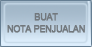
<style>
.page{position:relative;width:92px;height:47px}
.page>*{position:absolute;margin:0}
.t1{font:8.6px/11.3px "ArialMT";letter-spacing:-0.02em;color:#72787d;font-weight:bold}
</style>
<div class="page">
<p class="t1" style="left:7px;top:13px;width:78px;height:20px;text-align:center">BUAT<br>NOTA PENJUALAN</p>
</div>
